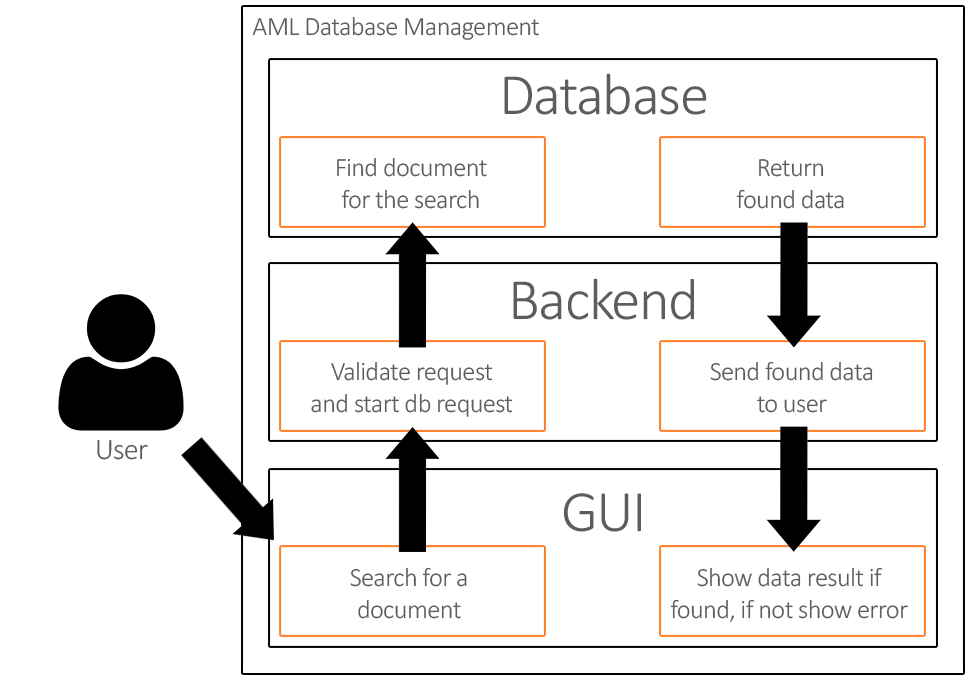
<style>
.page{position:relative;width:972px;height:684px;background:#ffffff}
.page>*{position:absolute;margin:0}
.t1{font:26.4px "Calibri-Light";letter-spacing:-0.025em;color:#5c5d5f}
.t2{font:59.1px "Calibri-Light";letter-spacing:-0.025em;color:#5c5d5f}
.t3{font:30px "Calibri-Light";letter-spacing:-0.025em;color:#5c5d5f}
.t4{font:26.5px "Calibri-Light";letter-spacing:-0.025em;color:#5c5d5f}
</style>
<div class="page">
<p class="t1" style="left:252px;top:16px;width:287px;height:24px">AML Database Management</p>
<p class="t2" style="left:504px;top:73px;width:203px;height:42px">Database</p>
<p class="t1" style="left:337px;top:158px;width:150px;height:51px;text-align:center">Find document<br>for the search</p>
<p class="t1" style="left:736px;top:159px;width:108px;height:50px;text-align:center">Return<br>found data</p>
<p class="t2" style="left:513px;top:278px;width:181px;height:42px">Backend</p>
<p class="t1" style="left:311px;top:362px;width:202px;height:55px;text-align:center">Validate request<br>and start db request</p>
<p class="t1" style="left:710px;top:361px;width:163px;height:52px;text-align:center">Send found data<br>to user</p>
<p class="t3" style="left:97px;top:439px;width:51px;height:21px">User</p>
<p class="t2" style="left:564px;top:493px;width:77px;height:39px">GUI</p>
<p class="t4" style="left:350px;top:567px;width:117px;height:52px;text-align:center">Search for a<br>document</p>
<p class="t4" style="left:670px;top:567px;width:238px;height:55px;text-align:center">Show data result if<br>found, if not show error</p>
</div>
